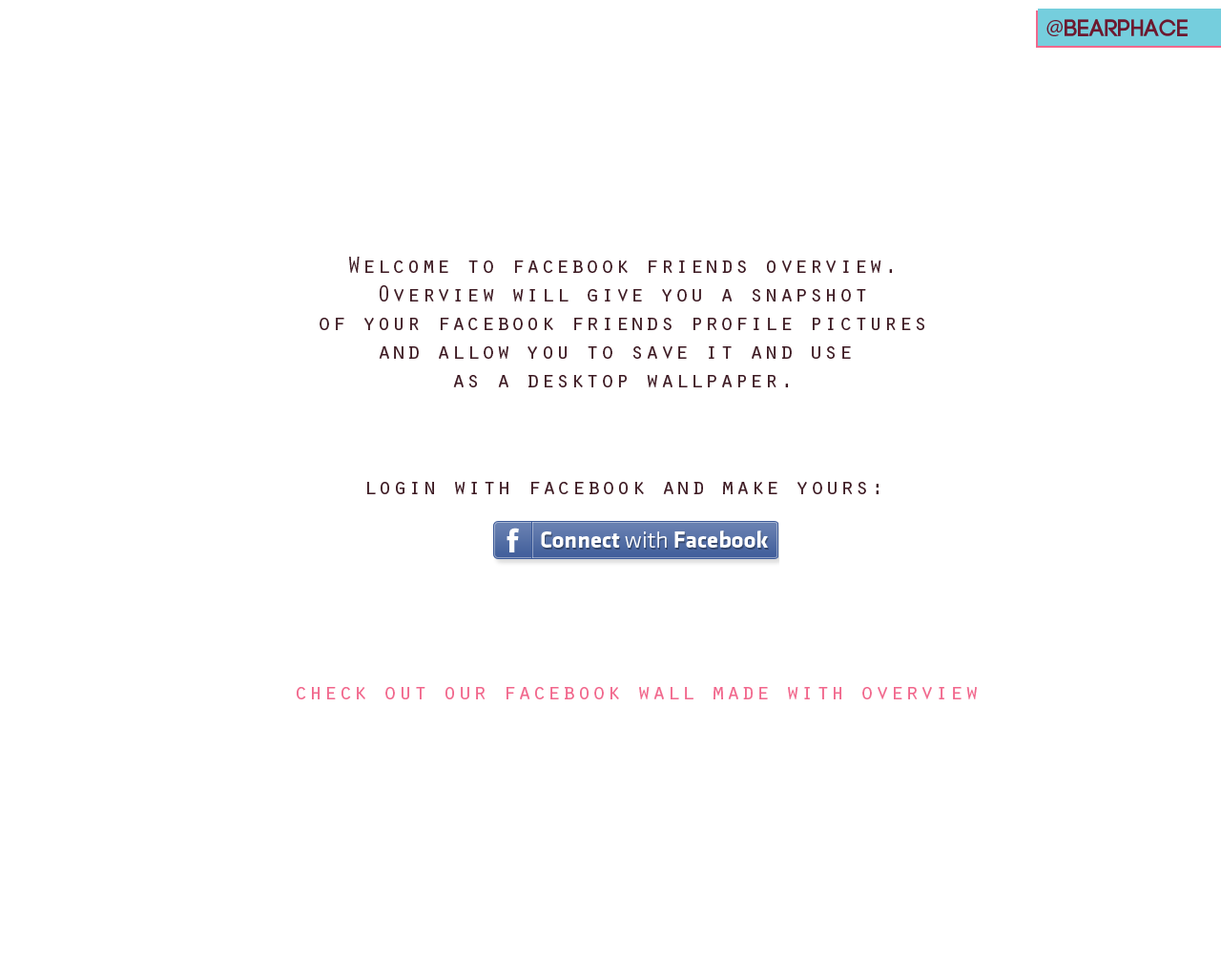
<style>
.page{position:relative;width:1221px;height:977px;background:#ffffff}
.page>*{position:absolute;margin:0}
.t1{font:23.8px "Code-Bold";letter-spacing:0.025em;color:#6c192f;text-transform:uppercase}
.t2{font:23.8px "MyriadPro-Regular";letter-spacing:0.025em;color:#6c192f;text-transform:uppercase}
.t3{font:23.8px "OratorStd";letter-spacing:0.025em;color:#3d1a23}
.t4{font:23.8px "OratorStd";letter-spacing:0.025em;color:#f1678c}
</style>
<div class="page">
<p class="t1" style="left:1046px;top:19px;width:141px;height:17px"><span class="t2">@</span>bearphace</p>
<p class="t3" style="left:320px;top:257px;width:604px;height:130px;text-align:center">Welcome to facebook friends overview.<br>Overview will give you a snapshot<br>of your facebook friends profile pictures<br>and allow you to save it and use <br>as a desktop wallpaper.</p>
<p class="t3" style="left:367px;top:482px;width:511px;height:12px">login with facebook and make yours:</p>
<p class="t4" style="left:297px;top:687px;width:680px;height:12px">check out our facebook wall made with overview</p>
</div>
